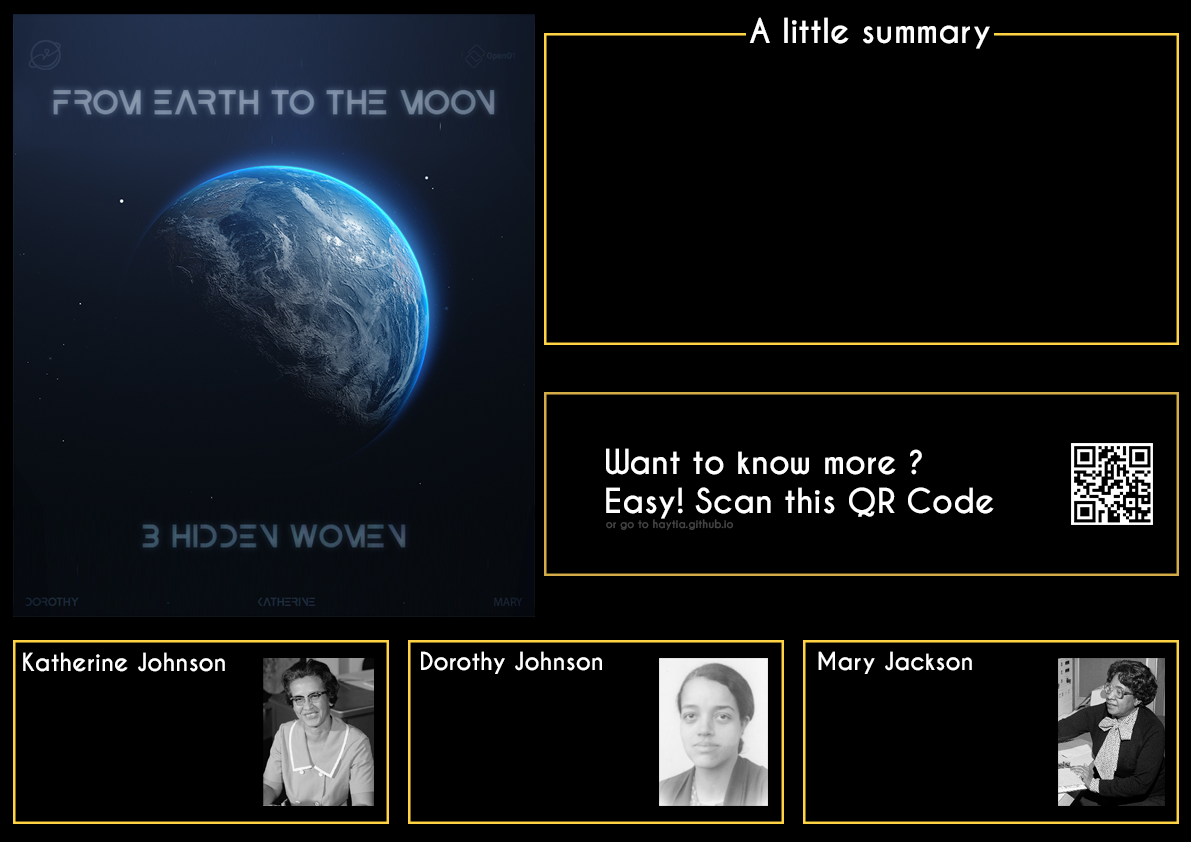
<style>
.page{position:relative;width:1191px;height:842px;background:#000000}
.page>*{position:absolute;margin:0}
.t1{font:32.3px "CaviarDreams-Bold";color:#ffffff}
.t2{font:10.7px "CaviarDreams-Bold";color:#444444}
.t3{font:23.5px "CaviarDreams-Bold";color:#ffffff}
</style>
<div class="page">
<p class="t1" style="left:749px;top:17px;width:241px;height:32px">A little summary</p>
<p class="t1" style="left:606px;top:448px;width:388px;height:71px">Want to know more ?<br>Easy! Scan this QR Code</p>
<p class="t2" style="left:606px;top:519px;width:128px;height:11px">or go to haytia.github.io</p>
<p class="t3" style="left:23px;top:652px;width:202px;height:20px">Katherine Johnson</p>
<p class="t3" style="left:421px;top:651px;width:181px;height:23px">Dorothy Johnson</p>
<p class="t3" style="left:818px;top:651px;width:154px;height:23px">Mary Jackson</p>
</div>
